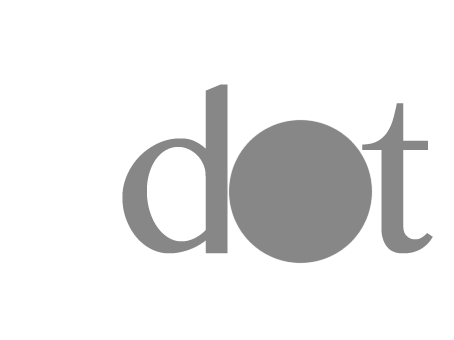
<style>
.page{position:relative;width:454px;height:340px;background:#ffffff}
.page>*{position:absolute;margin:0}
.t1{font:300px "SinhalaMN";letter-spacing:0.1em;color:#878787}
</style>
<div class="page">
<p class="t1" style="left:122px;top:84px;width:311px;height:170px">d t</p>
</div>
